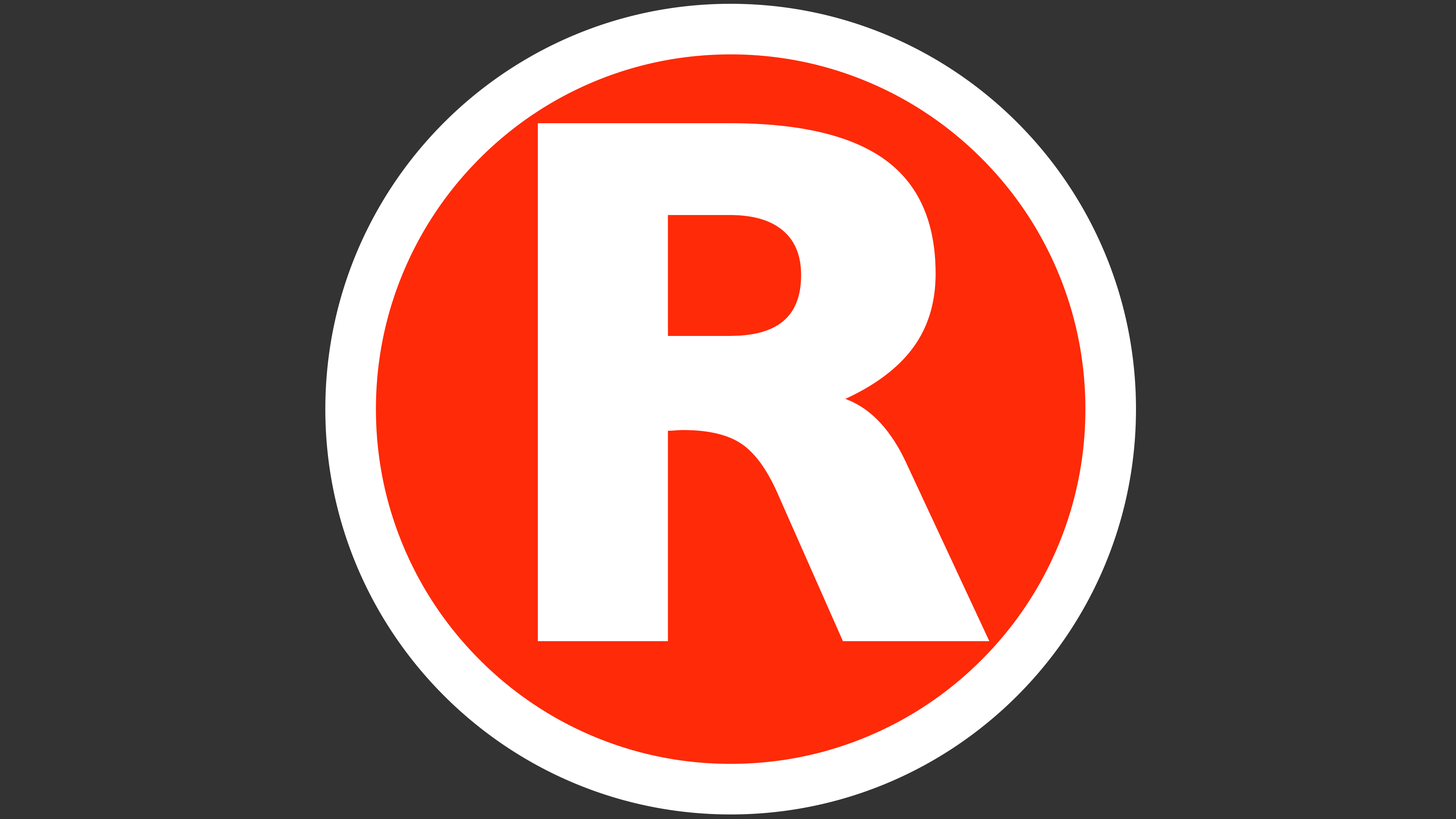
<style>
.page{position:relative;width:1456px;height:819px;background:#333333}
.page>*{position:absolute;margin:0}
.t1{font:758.3px "Humanist521BT-Bold";color:#ffffff}
</style>
<div class="page">
<p class="t1" style="left:538px;top:123px;width:452px;height:518px">R</p>
</div>
